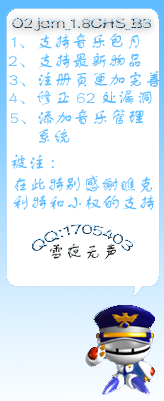
<style>
.page{position:relative;width:164px;height:401px;background:#ffffff}
.page>*{position:absolute;margin:0}
.t1{font:18px "FZSTK--GBK1-0"}
.t2{font:18px "FZSTK--GBK1-0";color:#5dbcff}
</style>
<div class="page">
<p class="t1" style="left:12px;top:17px;width:139px;height:14px">O2jam_1.8CHS_B3</p>
<p class="t2" style="left:11px;top:33px;width:128px;height:16px">1、支持音乐包月</p>
<p class="t2" style="left:9px;top:53px;width:132px;height:15px">2、支持最新物品</p>
<p class="t2" style="left:9px;top:71px;width:152px;height:17px">3、注册页更加完善</p>
<p class="t2" style="left:9px;top:90px;width:143px;height:16px">4、修正62处漏洞</p>
<p class="t2" style="left:10px;top:109px;width:134px;height:16px">5、添加音乐管理</p>
<p class="t2" style="left:38px;top:129px;width:32px;height:15px">系统</p>
<p class="t2" style="left:11px;top:154px;width:43px;height:15px">被注:</p>
<p class="t2" style="left:14px;top:175px;width:138px;height:18px">在此特别感谢瞧克</p>
<p class="t2" style="left:13px;top:194px;width:141px;height:16px">利特和小权的支持</p>
<p class="t1" style="left:32px;top:223px;width:101px;height:28px">QQ:1705403</p>
<p class="t1" style="left:50px;top:243px;width:66px;height:17px">雪夜无声</p>
</div>
